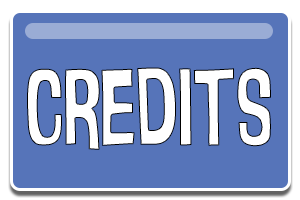
<style>
.page{position:relative;width:300px;height:200px;background:#5674b9}
.page>*{position:absolute;margin:0}
.t1{font:110.7px "InsideOut";color:#ffffff;scale:0.79 1}
</style>
<div class="page">
<p class="t1" style="left:27px;top:67px;width:244px;height:83px">credits</p>
</div>
